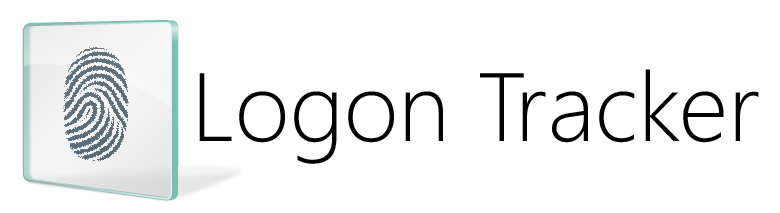
<style>
.page{position:relative;width:780px;height:213px;background:#ffffff}
.page>*{position:absolute;margin:0}
.t1{font:96.8px "Segoe-Light";color:#000000}
</style>
<div class="page">
<p class="t1" style="left:199px;top:69px;width:560px;height:95px">Logon Tracker</p>
</div>
